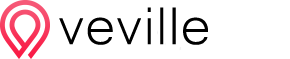
<style>
.page{position:relative;width:290px;height:59px;background:#ffffff}
.page>*{position:absolute;margin:0}
.t1{font:67.9px "Microsoft-Yi-Baiti";color:#000000;scale:1.08 1}
</style>
<div class="page">
<p class="t1" style="left:59px;top:7px;width:149px;height:38px">veville</p>
</div>
